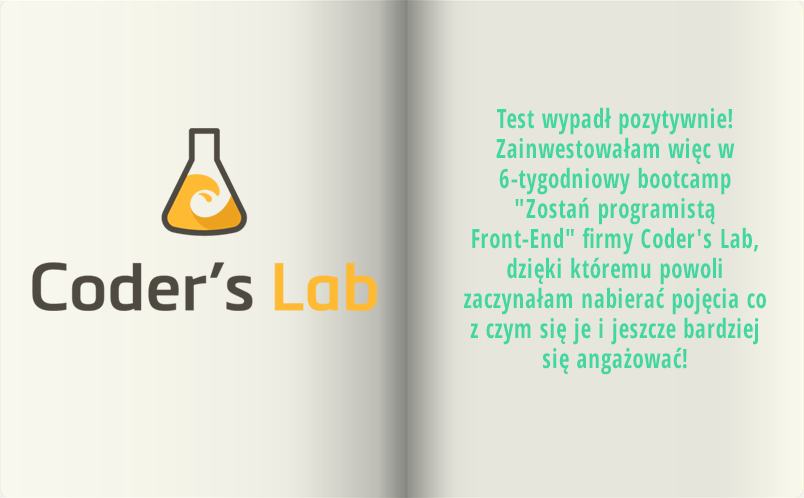
<style>
.page{position:relative;width:804px;height:498px;background:#e6e6dc}
.page>*{position:absolute;margin:0}
.t1{font:26.4px/30px "OpenSans-CondensedBold";letter-spacing:0.035em;color:#42d6a0;scale:0.86 1}
</style>
<div class="page">
<p class="t1" style="left:464px;top:107px;width:302px;height:268px;text-align:center">Test wypadł pozytywnie! <br>Zainwestowałam więc w <br>6-tygodniowy bootcamp "Zostań programistą <br>Front-End" firmy Coder's Lab, dzięki któremu powoli <br>zaczynałam nabierać pojęcia co z czym się je i jeszcze bardziej się angażować!</p>
</div>
